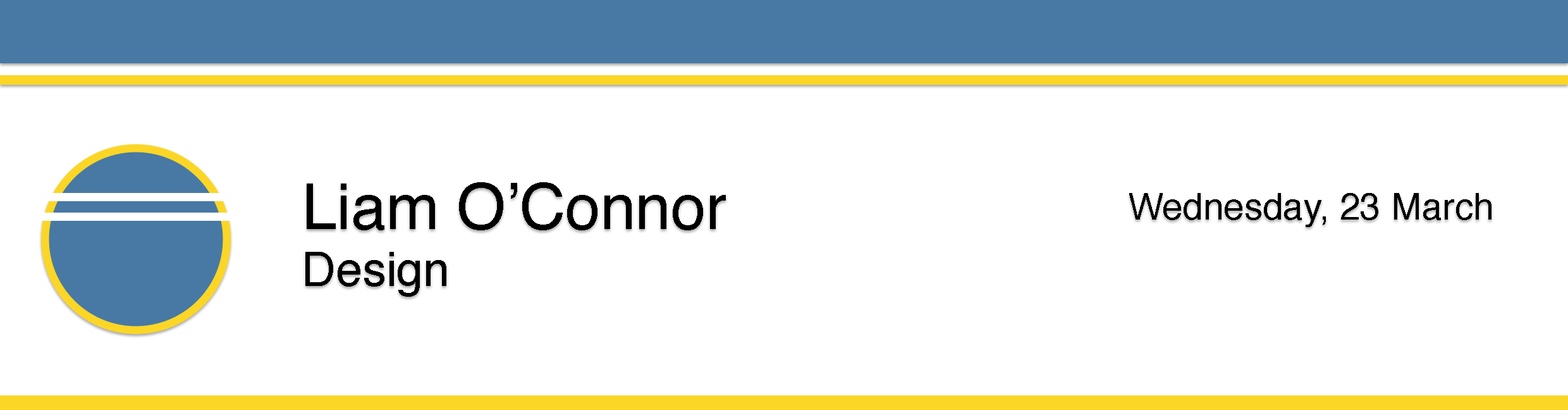
<style>
.page{position:relative;width:1568px;height:410px;background:#ffffff}
.page>*{position:absolute;margin:0}
.t1{font:63.2px "Helvetica";color:#000000}
.t2{font:47.4px "Helvetica";color:#000000}
.t3{font:36.9px "Helvetica";color:#000000}
</style>
<div class="page">
<p class="t1" style="left:305px;top:182px;width:421px;height:115px">Liam O’Connor<br><span class="t2">Design</span></p>
<p class="t3" style="left:1129px;top:193px;width:362px;height:34px">Wednesday, 23 March</p>
</div>
